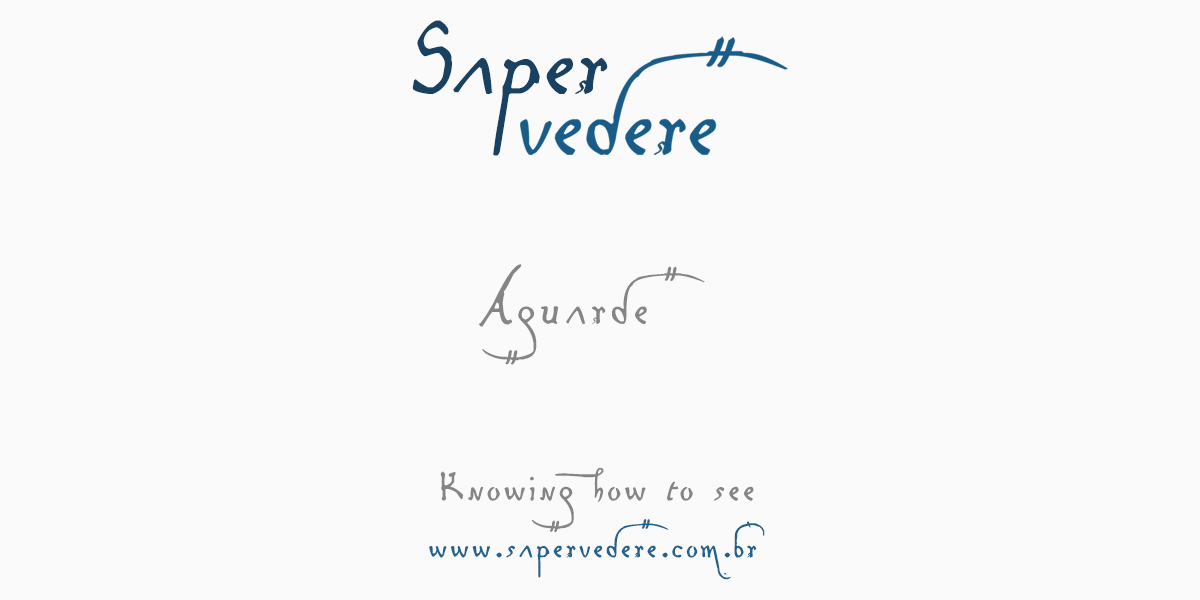
<style>
.page{position:relative;width:1200px;height:600px;background:#fafafa}
.page>*{position:absolute;margin:0}
.t1{font:147.1px "LeonardoHandF";color:#194162;font-style:italic}
.t2{font:71.9px "LeonardoHandF";letter-spacing:0.05em;color:#858585}
.t3{font:55.9px "LeonardoHandF";letter-spacing:0.05em;color:#858585}
.t4{font:47.9px "LeonardoHandF";letter-spacing:0.05em;color:#23628d}
</style>
<div class="page">
<p class="t1" style="left:412px;top:20px;width:196px;height:136px">Saper</p>
<p class="t2" style="left:479px;top:264px;width:226px;height:101px">Aguarde</p>
<p class="t3" style="left:440px;top:467px;width:314px;height:65px">Knowing how to see</p>
<p class="t4" style="left:428px;top:518px;width:337px;height:62px">www.sapervedere.com.br</p>
</div>
